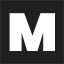
<style>
.page{position:relative;width:64px;height:64px;background:#202020}
.page>*{position:absolute;margin:0}
.t1{font:53.3px "Poppins-Black";color:#ffffff}
</style>
<div class="page">
<p class="t1" style="left:9px;top:13px;width:46px;height:38px">M</p>
</div>
